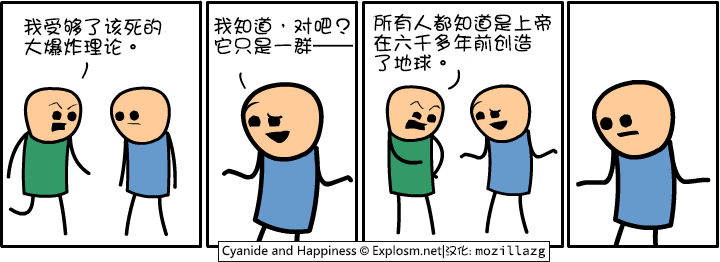
<style>
.page{position:relative;width:720px;height:262px;background:#ffffff}
.page>*{position:absolute;margin:0}
.t1{font:20px/20px "DFGirl";color:#000000}
</style>
<div class="page">
<p class="t1" style="left:213px;top:17px;width:140px;height:38px">我知道，对吧？<br>它只是一群——</p>
<p class="t1" style="left:374px;top:13px;width:177px;height:59px">所有人都知道是上帝<br>在六千多年前创造<br>了地球。</p>
<p class="t1" style="left:23px;top:18px;width:139px;height:38px">我受够了该死的<br>大爆炸理论。</p>
</div>
